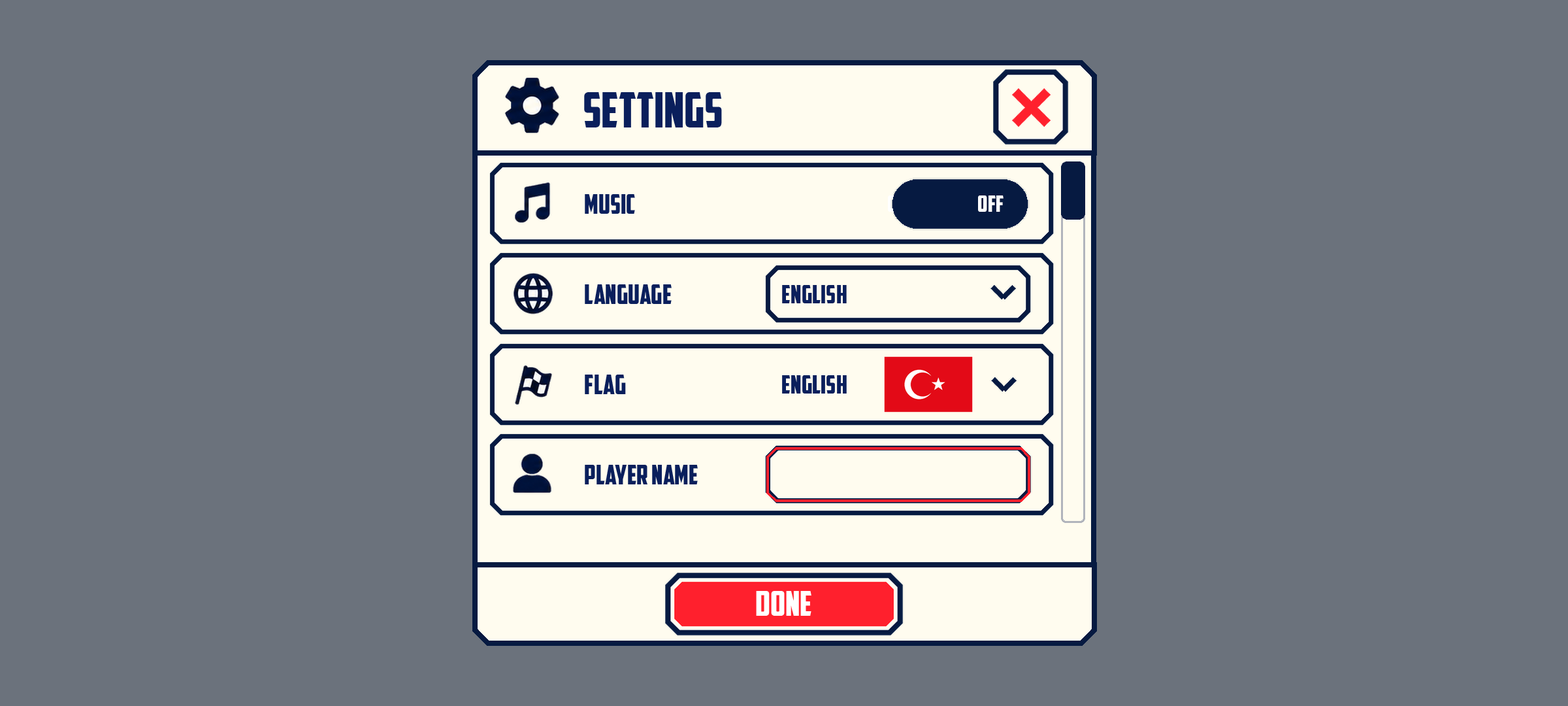
<style>
.page{position:relative;width:1568px;height:706px;background:#6b727c}
.page>*{position:absolute;margin:0}
.t1{font:48.3px "AmericanCaptain";color:#0a1f5c}
.t2{font:26.8px "AmericanCaptain";color:#0a1f5c}
.t3{font:22.9px "AmericanCaptain";color:#ffffff}
.t4{font:25.5px "AmericanCaptain";color:#0a1f5c}
.t5{font:34.6px "AmericanCaptain";color:#ffffff}
</style>
<div class="page">
<p class="t1" style="left:584px;top:92px;width:138px;height:35px">SETTINGS</p>
<p class="t2" style="left:585px;top:194px;width:50px;height:20px">Music</p>
<p class="t3" style="left:978px;top:195px;width:26px;height:17px">OFF</p>
<p class="t2" style="left:585px;top:284px;width:87px;height:20px">Language</p>
<p class="t4" style="left:782px;top:285px;width:65px;height:18px">English</p>
<p class="t2" style="left:585px;top:374px;width:41px;height:20px">Flag</p>
<p class="t4" style="left:782px;top:375px;width:65px;height:18px">English</p>
<p class="t2" style="left:585px;top:465px;width:113px;height:19px">Player Name</p>
<p class="t5" style="left:756px;top:591px;width:55px;height:24px">Done</p>
</div>
